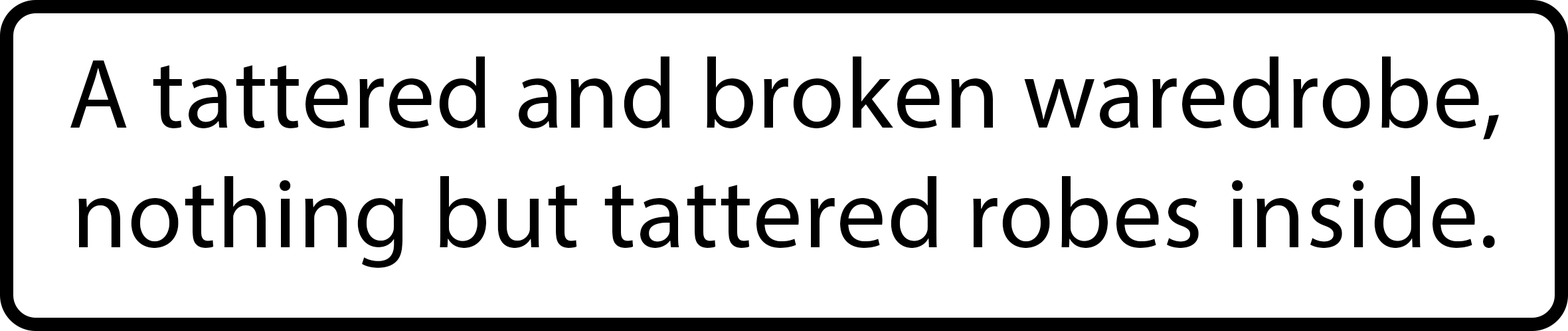
<style>
.page{position:relative;width:1568px;height:331px;background:#ffffff}
.page>*{position:absolute;margin:0}
.t1{font:99.6px "MyriadPro-Regular";letter-spacing:0.01em;color:#000000}
</style>
<div class="page">
<p class="t1" style="left:70px;top:56px;width:1429px;height:212px;text-align:center">A tattered and broken waredrobe,<br>nothing but tattered robes inside.</p>
</div>
